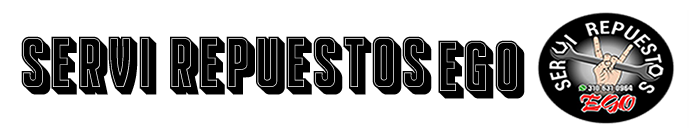
<style>
.page{position:relative;width:697px;height:128px;background:#ffffff}
.page>*{position:absolute;margin:0}
.t1{font:72px "FranchiseFilled-Regular";color:#000000;text-transform:uppercase}
</style>
<div class="page">
<p class="t1" style="left:21px;top:36px;width:411px;height:59px">SERVI REPUESTOS</p>
<p class="t1" style="left:438px;top:40px;width:87px;height:59px">ego</p>
</div>
